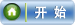
<style>
.page{position:relative;width:75px;height:25px}
.page>*{position:absolute;margin:0}
.t1{font:13.3px "AdobeHeitiStd-Regular";text-transform:uppercase}
.t2{font:13.3px "AdobeHeitiStd-Regular";color:#ffffff;text-transform:uppercase}
</style>
<div class="page">
<p class="t1" style="left:34px;top:5px;width:31px;height:14px">开  始</p>
<p class="t2" style="left:35px;top:5px;width:31px;height:14px">开  始</p>
</div>
